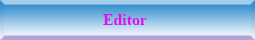
<style>
.page{position:relative;width:255px;height:40px}
.page>*{position:absolute;margin:0}
.t1{font:15.8px "TimesNewRomanPS-BoldMT";color:#d815ed}
</style>
<div class="page">
<p class="t1" style="left:103px;top:14px;width:44px;height:11px">Editor</p>
</div>
